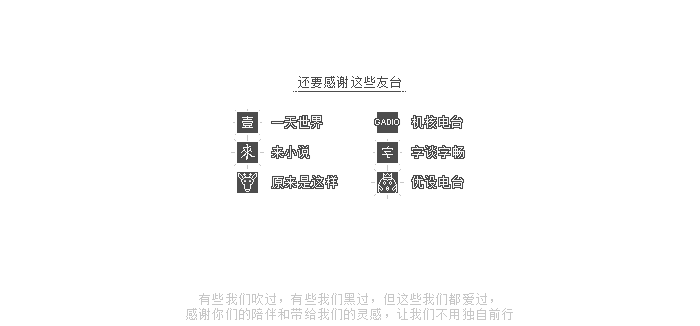
<style>
.page{position:relative;width:700px;height:326px;background:#ffffff}
.page>*{position:absolute;margin:0}
.t1{font:12px "FZXS12--GB1-0";letter-spacing:0.1em;color:#4a4a4a}
.t2{font:12px "FZXS12--GB1-0";letter-spacing:0.1em;color:#f7f7f7}
.t3{font:8px "ArialMT";letter-spacing:0.1em;color:#f7f7f7}
.t4{font:17.4px "DFKaiShu-SB-Estd-BF";letter-spacing:0.1em;color:#f7f7f7}
.t5{font:12px/14.6px "FZXS12--GB1-0";letter-spacing:0.1em;color:#c7c7c7}
</style>
<div class="page">
<p class="t1" style="left:298px;top:76px;width:103px;height:12px">还要感谢这些友台</p>
<p class="t2" style="left:242px;top:116px;width:11px;height:12px">壹</p>
<p class="t2" style="left:272px;top:116px;width:50px;height:12px">一天世界</p>
<p class="t3" style="left:375px;top:119px;width:24px;height:6px">GADIO</p>
<p class="t2" style="left:412px;top:116px;width:50px;height:12px">机核电台</p>
<p class="t4" style="left:241px;top:144px;width:14px;height:16px">來</p>
<p class="t2" style="left:272px;top:146px;width:37px;height:12px">来小说</p>
<p class="t2" style="left:382px;top:146px;width:11px;height:12px;rotate:180deg">字</p>
<p class="t2" style="left:412px;top:146px;width:52px;height:12px">字谈字畅</p>
<p class="t2" style="left:272px;top:176px;width:65px;height:12px">原来是这样</p>
<p class="t2" style="left:412px;top:176px;width:51px;height:12px">优设电台</p>
<p class="t5" style="left:186px;top:293px;width:327px;height:27px;text-align:center">有些我们吹过，有些我们黑过，但这些我们都爱过，<br>感谢你们的陪伴和带给我们的灵感，让我们不用独自前行</p>
</div>
